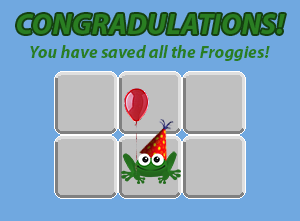
<style>
.page{position:relative;width:300px;height:221px;background:#70a8e0}
.page>*{position:absolute;margin:0}
.t1{font:29.1px "MyriadPro-BoldIt";letter-spacing:0.005em;color:#2a7e22;text-transform:uppercase}
.t2{font:17.4px "MyriadPro-BoldIt";letter-spacing:0.005em;color:#2a7e22}
</style>
<div class="page">
<p class="t1" style="left:17px;top:14px;width:268px;height:20px">Congradulations!</p>
<p class="t2" style="left:30px;top:45px;width:240px;height:16px">You have saved all the Froggies!</p>
</div>
